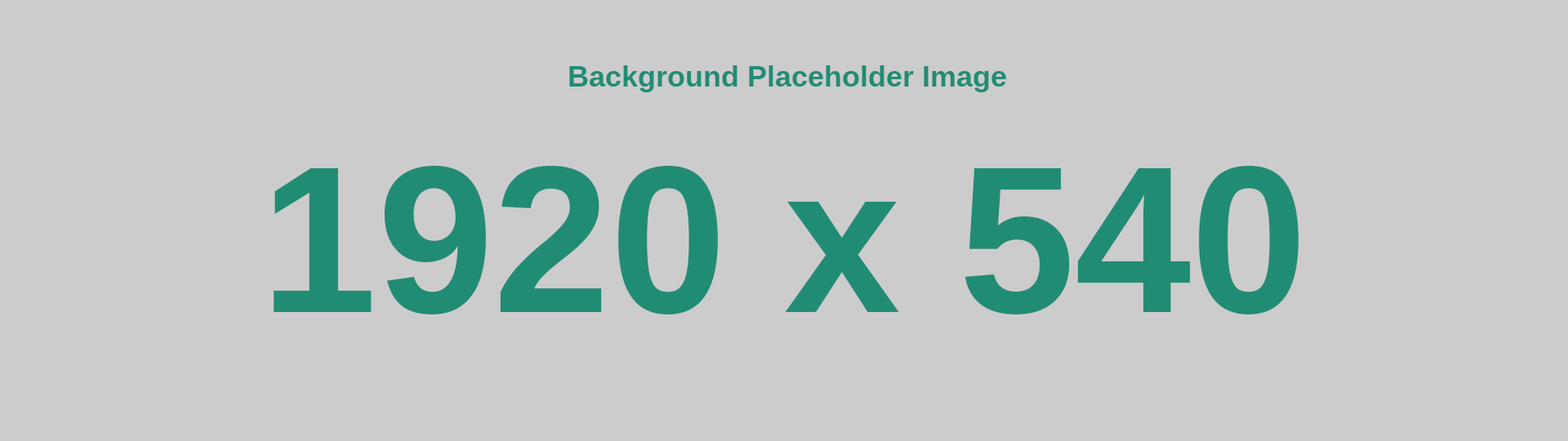
<style>
.page{position:relative;width:1568px;height:441px;background:#cccccc}
.page>*{position:absolute;margin:0}
.t1{font:29.4px "Arimo-Bold";color:#218c74}
.t2{font:209.1px "Arimo-Bold";color:#218c74}
</style>
<div class="page">
<p class="t1" style="left:569px;top:65px;width:437px;height:27px">Background Placeholder Image</p>
<p class="t2" style="left:274px;top:166px;width:1024px;height:148px">1920 x 540</p>
</div>
